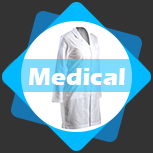
<style>
.page{position:relative;width:153px;height:153px;background:#333333}
.page>*{position:absolute;margin:0}
.t1{font:25px "ErasITC-Bold";color:#ffffff}
</style>
<div class="page">
<p class="t1" style="left:28px;top:68px;width:97px;height:17px">Medical</p>
</div>
